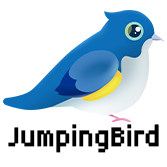
<style>
.page{position:relative;width:167px;height:167px;background:#ffffff}
.page>*{position:absolute;margin:0}
.t1{font:27.1px "LoRes9OT-NarrowRegular";color:#000000;font-weight:bold}
</style>
<div class="page">
<p class="t1" style="left:8px;top:124px;width:151px;height:29px">JumpingBird</p>
</div>
